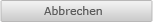
<style>
.page{position:relative;width:153px;height:22px}
.page>*{position:absolute;margin:0}
.t1{font:11px "Verdana";color:#5b5b5b}
</style>
<div class="page">
<p class="t1" style="left:44px;top:6px;width:58px;height:9px">Abbrechen</p>
</div>
